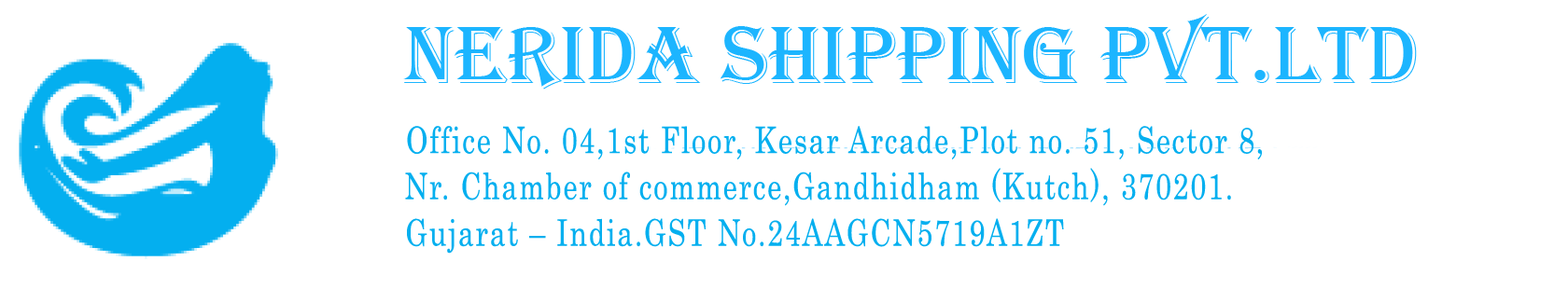
<style>
.page{position:relative;width:1568px;height:289px;background:#ffffff}
.page>*{position:absolute;margin:0}
.t1{font:36.6px "Century";letter-spacing:0.06em;color:#04afef;scale:0.77 1}
</style>
<div class="page">
<p class="t1" style="left:407px;top:126px;width:855px;height:34px">Office No. 04,1st Floor, Kesar Arcade,Plot no. 51, Sector 8,</p>
<p class="t1" style="left:405px;top:168px;width:826px;height:38px">Nr. Chamber of commerce,Gandhidham (Kutch), 370201.</p>
<p class="t1" style="left:407px;top:218px;width:657px;height:36px">Gujarat – India.GST No.24AAGCN5719A1ZT</p>
</div>
